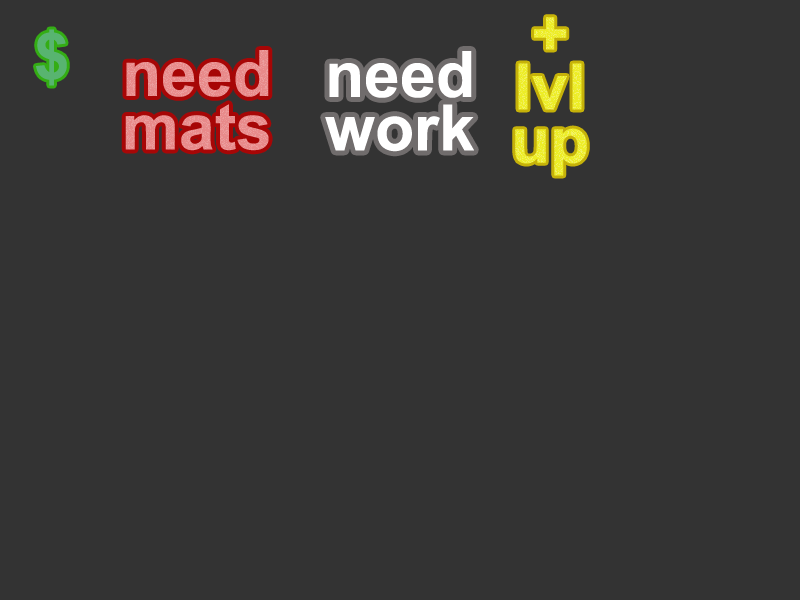
<style>
.page{position:relative;width:800px;height:600px;background:#333333}
.page>*{position:absolute;margin:0}
.t1{font:64px/53.3px "Arial-BoldMT"}
.t2{font:64px "Arial-BoldMT";color:#58b470}
.t3{font:64px/53.3px "Arial-BoldMT";color:#e88a8a}
.t4{font:64px/53.3px "Arial-BoldMT";color:#ffffff}
</style>
<div class="page">
<p class="t1" style="left:515px;top:17px;width:72px;height:159px;text-align:center">+<br>lvl<br>up</p>
<p class="t2" style="left:36px;top:29px;width:31px;height:57px">$</p>
<p class="t3" style="left:125px;top:50px;width:144px;height:101px;text-align:center">need<br>mats</p>
<p class="t4" style="left:325px;top:51px;width:149px;height:101px;text-align:center">need<br>work</p>
</div>
